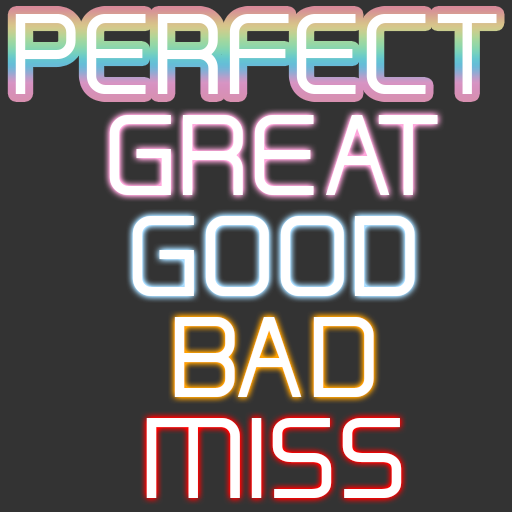
<style>
.page{position:relative;width:512px;height:512px;background:#333333}
.page>*{position:absolute;margin:0}
.t1{font:120px "HallFetica";color:#ffffff}
</style>
<div class="page">
<p class="t1" style="left:15px;top:14px;width:482px;height:80px">PERFECT</p>
<p class="t1" style="left:109px;top:115px;width:329px;height:80px">GREAT</p>
<p class="t1" style="left:132px;top:216px;width:283px;height:80px">GOOD</p>
<p class="t1" style="left:174px;top:317px;width:200px;height:80px">BAD</p>
<p class="t1" style="left:146px;top:418px;width:256px;height:80px">MISS</p>
</div>
